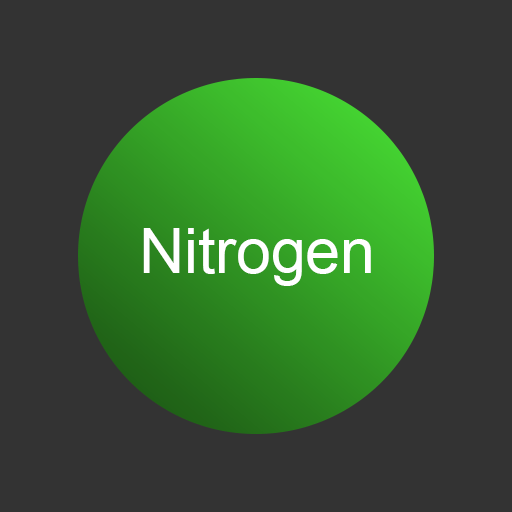
<style>
.page{position:relative;width:512px;height:512px;background:#333333}
.page>*{position:absolute;margin:0}
.t1{font:62.5px "ArialMT";color:#ffffff}
</style>
<div class="page">
<p class="t1" style="left:143px;top:228px;width:228px;height:58px">Nitrogen</p>
</div>
